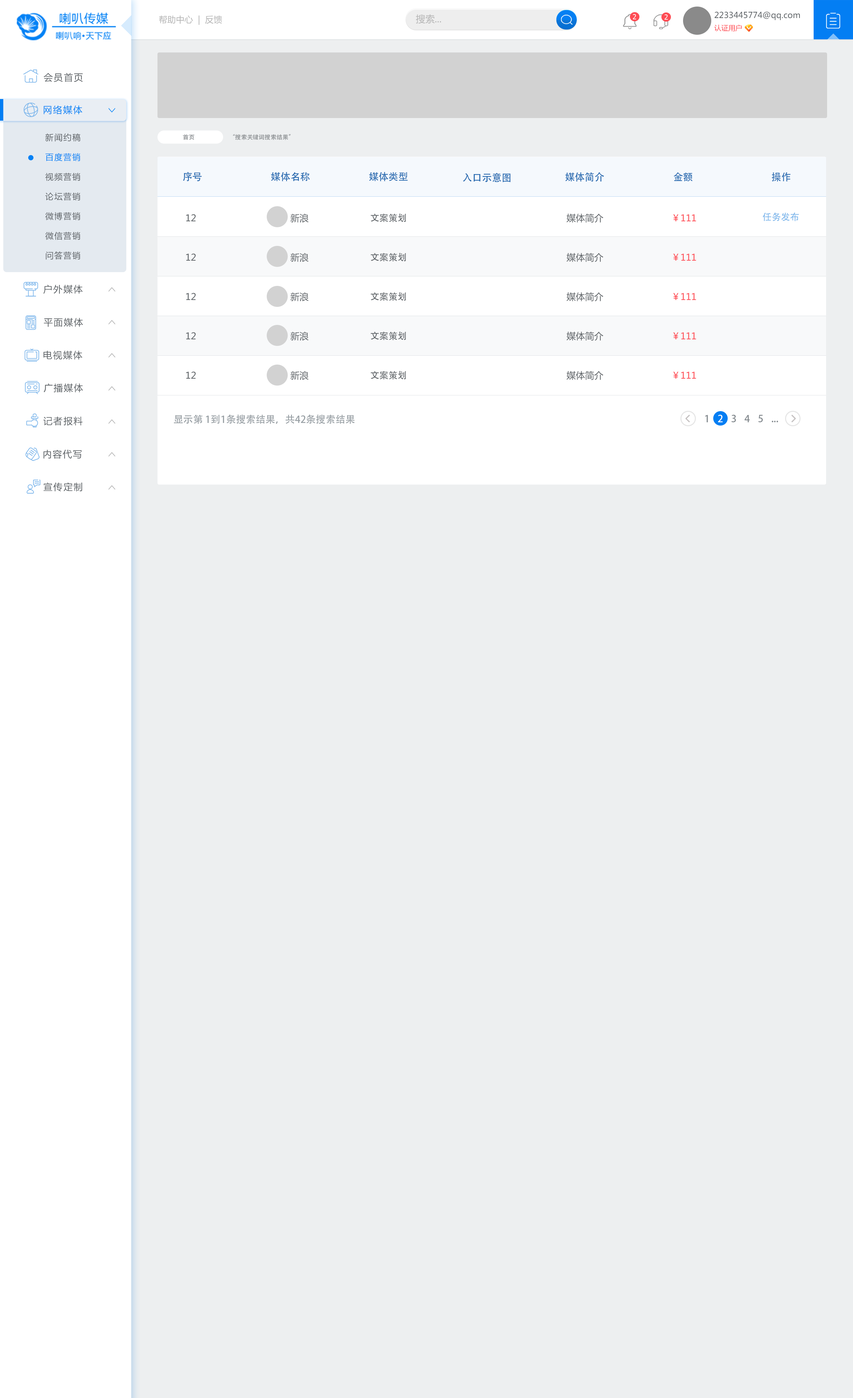
<style>
.page{position:relative;width:853px;height:1398px;background:#edeff0}
.page>*{position:absolute;margin:0}
.t1{font:8.6px "MicrosoftYaHei";color:#b4b4b4}
.t2{font:9.4px "MicrosoftYaHei";color:#b4b4b4}
.t3{font:6.9px "Tahoma";letter-spacing:0.1em;color:#ffffff;text-transform:uppercase}
.t4{font:8.2px/12.3px "MicrosoftYaHei";color:#5c6165}
.t5{font:7.1px/12.3px "MicrosoftYaHei";color:#fe4d55}
.t6{font:9.2px "MicrosoftYaHei";letter-spacing:0.1em;color:#5c6165}
.t7{font:9.2px "MicrosoftYaHei";letter-spacing:0.1em;color:#0582f5}
.t8{font:8.2px/19.7px "MicrosoftYaHei";letter-spacing:0.1em;color:#5c6165}
.t9{font:8.2px/19.7px "MicrosoftYaHei";letter-spacing:0.1em;color:#0381f5}
.t10{font:5.9px "AdobeHeitiStd-Regular";color:#878b8e}
.t11{font:9.8px "AdobeHeitiStd-Regular";color:#276ab0;text-transform:uppercase}
.t12{font:9.2px/39.4px "MicrosoftYaHei";color:#5c6165}
.t13{font:9.2px/39.4px "AdobeHeitiStd-Regular";color:#5c6165}
.t14{font:9.2px/39.4px "MicrosoftYaHei";color:#fe4d55}
.t15{font:9.2px "AdobeHeitiStd-Regular";color:#7db6eb}
.t16{font:9.8px "AdobeHeitiStd-Regular";color:#989fa4;text-transform:uppercase}
.t17{font:9.8px "AdobeHeitiStd-Regular";letter-spacing:0.8em;color:#83898e;text-transform:uppercase}
.t18{font:9.8px "AdobeHeitiStd-Regular";letter-spacing:0.8em;color:#feffff;text-transform:uppercase}
.t19{font:9.8px "AdobeHeitiStd-Regular";color:#83898e;text-transform:uppercase}
</style>
<div class="page">
<p class="t1" style="left:159px;top:15px;width:63px;height:10px">帮助中心  |  反馈</p>
<p class="t2" style="left:416px;top:14px;width:25px;height:10px">搜索...</p>
<p class="t3" style="left:633px;top:14px;width:3px;height:5px">2</p>
<p class="t3" style="left:664px;top:14px;width:4px;height:6px">2</p>
<p class="t4" style="left:714px;top:11px;width:86px;height:20px">2233445774@qq.com<br><span class="t5">认证用户</span></p>
<p class="t6" style="left:44px;top:73px;width:39px;height:9px">会员首页</p>
<p class="t7" style="left:44px;top:105px;width:38px;height:9px">网络媒体</p>
<p class="t8" style="left:45px;top:133px;width:35px;height:127px">新闻约稿<br><span class="t9">百度营销<br></span>视频营销<br>论坛营销<br>微博营销<br>微信营销<br>问答营销</p>
<p class="t10" style="left:183px;top:134px;width:11px;height:6px">首页</p>
<p class="t10" style="left:233px;top:134px;width:58px;height:6px">“搜索关键词搜索结果”</p>
<p class="t11" style="left:183px;top:172px;width:19px;height:9px">序号</p>
<p class="t11" style="left:271px;top:172px;width:39px;height:9px">媒体名称</p>
<p class="t11" style="left:369px;top:172px;width:39px;height:9px">媒体类型</p>
<p class="t11" style="left:463px;top:173px;width:47px;height:9px">入口示意图</p>
<p class="t11" style="left:565px;top:172px;width:39px;height:10px">媒体简介</p>
<p class="t11" style="left:673px;top:172px;width:19px;height:10px">金额</p>
<p class="t11" style="left:771px;top:172px;width:19px;height:10px">操作</p>
<p class="t12" style="left:186px;top:214px;width:10px;height:165px">12<br>12<br>12<br>12<br>12</p>
<p class="t12" style="left:290px;top:214px;width:19px;height:166px">新浪<br>新浪<br>新浪<br>新浪<br>新浪</p>
<p class="t13" style="left:371px;top:214px;width:35px;height:166px">文案策划<br>文案策划<br>文案策划<br>文案策划<br>文案策划</p>
<p class="t12" style="left:566px;top:214px;width:37px;height:166px">媒体简介<br>媒体简介<br>媒体简介<br>媒体简介<br>媒体简介</p>
<p class="t14" style="left:673px;top:214px;width:23px;height:165px">￥111<br>￥111<br>￥111<br>￥111<br>￥111</p>
<p class="t15" style="left:763px;top:213px;width:36px;height:8px">任务发布</p>
<p class="t6" style="left:43px;top:285px;width:40px;height:9px">户外媒体</p>
<p class="t6" style="left:44px;top:318px;width:39px;height:9px">平面媒体</p>
<p class="t6" style="left:43px;top:351px;width:39px;height:9px">电视媒体</p>
<p class="t6" style="left:44px;top:383px;width:39px;height:10px">广播媒体</p>
<p class="t6" style="left:43px;top:417px;width:40px;height:9px">记者报料</p>
<p class="t16" style="left:174px;top:415px;width:181px;height:9px">显示第 1到1条搜索结果，共42条搜索结果</p>
<p class="t17" style="left:705px;top:415px;width:73px;height:7px">1<span class="t18">2</span>345<span class="t19">...</span></p>
<p class="t6" style="left:43px;top:450px;width:39px;height:9px">内容代写</p>
<p class="t6" style="left:43px;top:482px;width:39px;height:10px">宣传定制</p>
</div>
